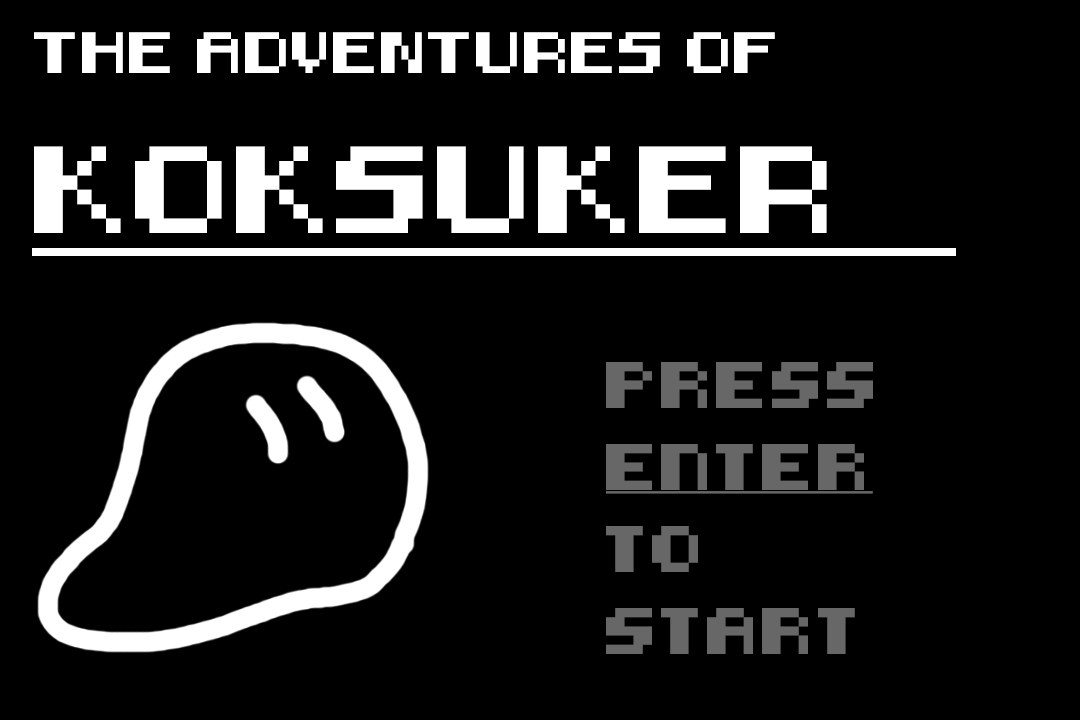
<style>
.page{position:relative;width:1080px;height:720px;background:#000000}
.page>*{position:absolute;margin:0}
.t1{font:34px "8-bit-HUD";color:#ffffff}
.t2{font:72px "8-bit-HUD";color:#ffffff}
.t3{font:46px/82px "8-bit-HUD";color:#676767}
.t4{font:46px/82px "8-bit-HUD";color:#676767;text-decoration:underline}
</style>
<div class="page">
<p class="t1" style="left:34px;top:32px;width:741px;height:41px">THE ADVENTURES OF</p>
<p class="t2" style="left:34px;top:146px;width:793px;height:87px">KOKSUKER</p>
<p class="t3" style="left:606px;top:362px;width:267px;height:292px">press<br><span class="t4">enter<br></span>to<br>start</p>
</div>
